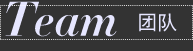
<style>
.page{position:relative;width:193px;height:51px;background:#333333}
.page>*{position:absolute;margin:0}
.t1{font:48px "Didot-HTF-B24-Bold-Ital";color:#e6e6ff}
.t2{font:20px "SimHei";color:#e6e6ff}
</style>
<div class="page">
<p class="t1" style="left:5px;top:1px;width:112px;height:36px">Team</p>
<p class="t2" style="left:139px;top:13px;width:38px;height:19px">团队</p>
</div>
